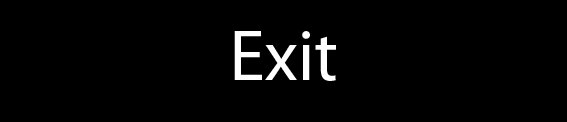
<style>
.page{position:relative;width:567px;height:122px;background:#000000}
.page>*{position:absolute;margin:0}
.t1{font:72px "MyriadPro-Regular";color:#ffffff}
</style>
<div class="page">
<p class="t1" style="left:234px;top:31px;width:102px;height:50px">Exit</p>
</div>
